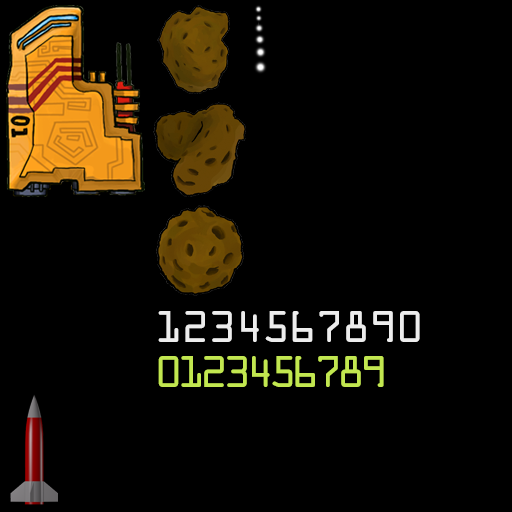
<style>
.page{position:relative;width:512px;height:512px;background:#000000}
.page>*{position:absolute;margin:0}
.t1{font:40px "OCRAStd";letter-spacing:-0.05em;color:#ffffff}
.t2{font:40px "OCRAStd";letter-spacing:-0.15em;color:#d1f957}
</style>
<div class="page">
<p class="t1" style="left:158px;top:311px;width:262px;height:31px;opacity:0.89">1234567890</p>
<p class="t2" style="left:158px;top:356px;width:226px;height:31px;opacity:0.89">0123456789</p>
</div>
